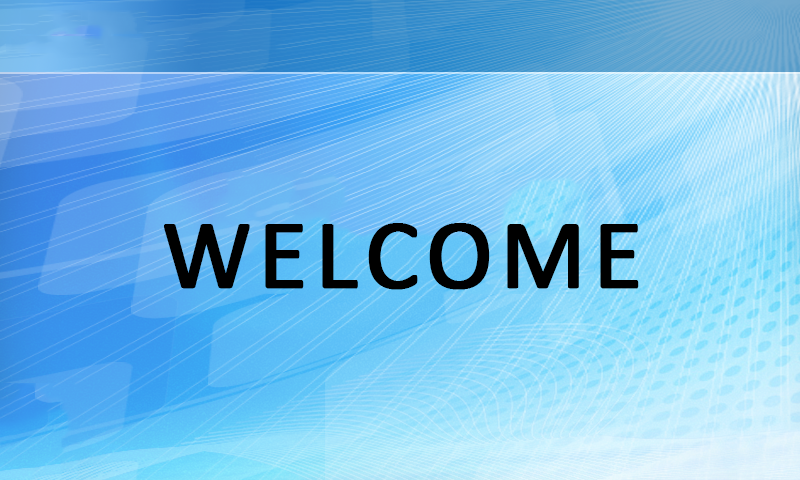
<style>
.page{position:relative;width:800px;height:480px}
.page>*{position:absolute;margin:0}
.t1{font:100px "Calibri";letter-spacing:0.05em;color:#000000;font-weight:bold}
</style>
<div class="page">
<p class="t1" style="left:164px;top:223px;width:475px;height:67px">WELCOME</p>
</div>
